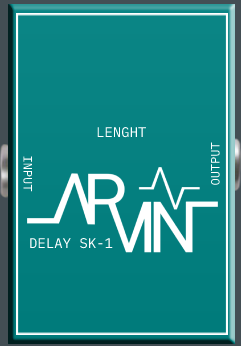
<style>
.page{position:relative;width:241px;height:346px}
.page>*{position:absolute;margin:0}
.t1{font:14px "iAWriterDuospace-Regular";color:#ffffff}
.t2{font:14px "iAWriterDuospace-Regular";color:#434e54}
.t3{font:12px "iAWriterDuospace-Regular";color:#ffffff}
</style>
<div class="page">
<p class="t1" style="left:97px;top:127px;width:50px;height:11px"><span class="t2">L</span>ENGHT</p>
<p class="t3" style="left:210px;top:142px;width:10px;height:43px;rotate:-90deg">OUTPUT</p>
<p class="t3" style="left:23px;top:156px;width:9px;height:36px;rotate:90deg">INPUT</p>
<p class="t1" style="left:30px;top:238px;width:83px;height:11px">DELAY SK-1</p>
</div>
